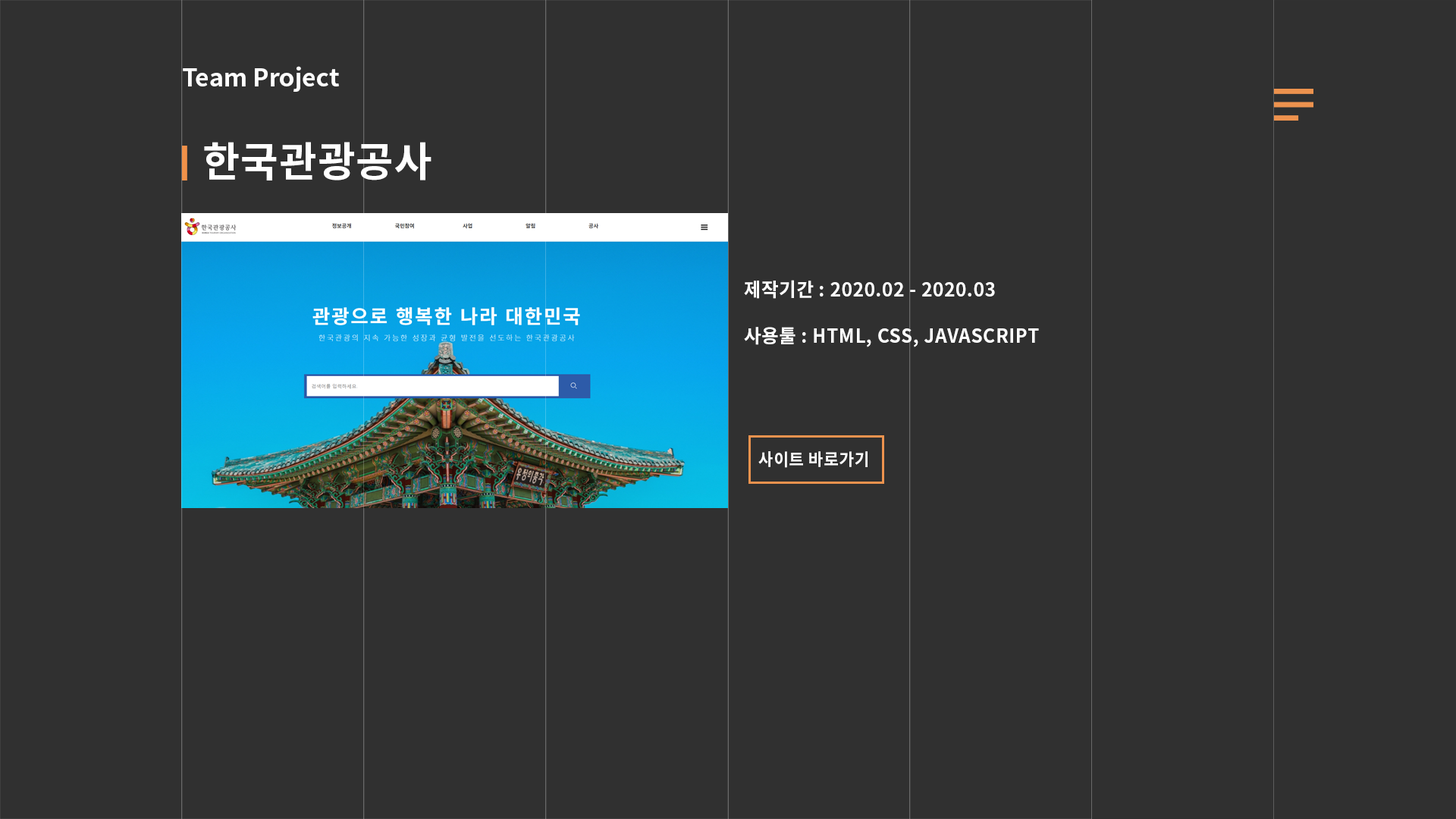
<style>
.page{position:relative;width:1456px;height:819px;background:#303030}
.page>*{position:absolute;margin:0}
.t1{font:24.4px "NotoSansKR-Bold";color:#ffffff}
.t2{font:41.1px "NotoSansKR-Bold";letter-spacing:0.025em;color:#ffffff}
.t3{font:19px "NotoSansKR-Bold";letter-spacing:0.025em;color:#ffffff}
.t4{font:16.9px "NotoSansKR-Bold";letter-spacing:0.025em;color:#ffffff;scale:0.96 1}
</style>
<div class="page">
<p class="t1" style="left:183px;top:66px;width:156px;height:26px">Team Project</p>
<p class="t2" style="left:204px;top:142px;width:227px;height:38px">한국관광공사</p>
<p class="t3" style="left:744px;top:280px;width:251px;height:19px">제작기간 : 2020.02 - 2020.03</p>
<p class="t3" style="left:744px;top:327px;width:295px;height:20px">사용툴 : HTML, CSS, JAVASCRIPT</p>
<p class="t4" style="left:758px;top:451px;width:110px;height:17px">사이트 바로가기</p>
</div>
